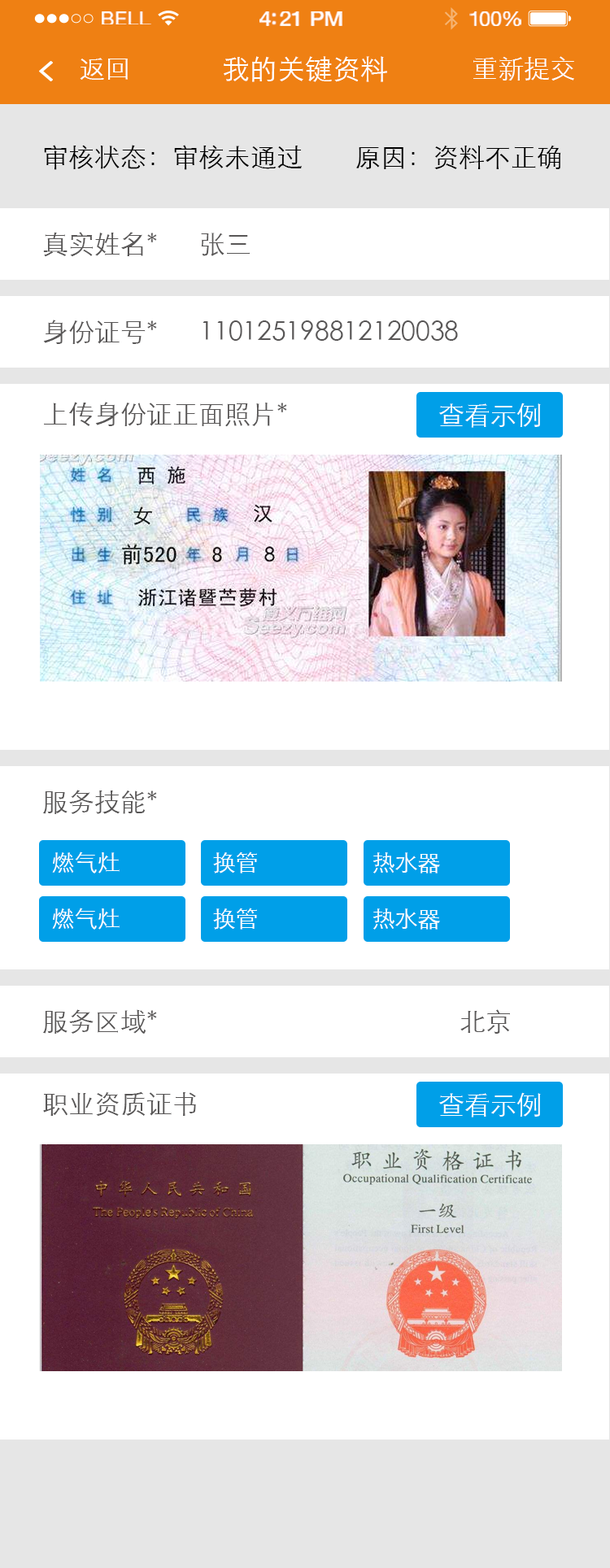
<style>
.page{position:relative;width:610px;height:1568px;background:#ffffff}
.page>*{position:absolute;margin:0}
.t1{font:18.9px "HelveticaNeue";letter-spacing:0.02em;color:#ffffff;scale:1.06 1}
.t2{font:20.6px "HelveticaNeue-Medium";letter-spacing:-0.02em;color:#ffffff;scale:1.06 1}
.t3{font:19.7px "HelveticaNeue";letter-spacing:-0.02em;color:#ffffff;scale:1.06 1}
.t4{font:26px "STXihei";color:#ffffff}
.t5{font:27.7px "STXihei";color:#ffffff}
.t6{font:26px "STXihei";color:#000000}
.t7{font:26px "STXihei";color:#595757}
.t8{font:22.8px "STXihei";color:#ffffff}
</style>
<div class="page">
<p class="t1" style="left:102px;top:11px;width:49px;height:13px">BELL</p>
<p class="t2" style="left:259px;top:11px;width:83px;height:15px">4:21 PM</p>
<p class="t3" style="left:469px;top:11px;width:52px;height:15px">100%</p>
<p class="t4" style="left:80px;top:58px;width:48px;height:22px">返回</p>
<p class="t5" style="left:224px;top:56px;width:163px;height:26px">我的关键资料</p>
<p class="t4" style="left:473px;top:56px;width:101px;height:25px">重新提交</p>
<p class="t6" style="left:44px;top:145px;width:517px;height:25px">审核状态：审核未通过        原因：资料不正确</p>
<p class="t7" style="left:43px;top:232px;width:114px;height:25px">真实姓名*</p>
<p class="t7" style="left:201px;top:233px;width:49px;height:23px">张三</p>
<p class="t7" style="left:43px;top:320px;width:114px;height:24px">身份证号*</p>
<p class="t7" style="left:203px;top:320px;width:255px;height:21px">110125198812120038</p>
<p class="t7" style="left:44px;top:402px;width:243px;height:25px">上传身份证正面照片*</p>
<p class="t4" style="left:439px;top:403px;width:102px;height:25px">查看示例</p>
<p class="t7" style="left:43px;top:790px;width:114px;height:24px">服务技能*</p>
<p class="t8" style="left:52px;top:852px;width:68px;height:21px">燃气灶</p>
<p class="t8" style="left:213px;top:852px;width:44px;height:21px">换管</p>
<p class="t8" style="left:373px;top:852px;width:67px;height:21px">热水器</p>
<p class="t8" style="left:52px;top:908px;width:68px;height:22px">燃气灶</p>
<p class="t8" style="left:213px;top:908px;width:44px;height:22px">换管</p>
<p class="t8" style="left:373px;top:908px;width:67px;height:22px">热水器</p>
<p class="t7" style="left:43px;top:1009px;width:114px;height:25px">服务区域*</p>
<p class="t7" style="left:460px;top:1009px;width:50px;height:25px">北京</p>
<p class="t7" style="left:43px;top:1091px;width:153px;height:25px">职业资质证书</p>
<p class="t4" style="left:439px;top:1092px;width:102px;height:25px">查看示例</p>
</div>
